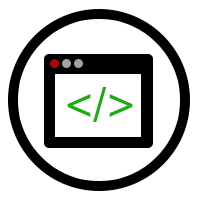
<style>
.page{position:relative;width:200px;height:200px;background:#ffffff}
.page>*{position:absolute;margin:0}
.t1{font:48px "ArialMT";color:#1eac15}
</style>
<div class="page">
<p class="t1" style="left:67px;top:87px;width:66px;height:35px">&lt;/&gt;</p>
</div>
